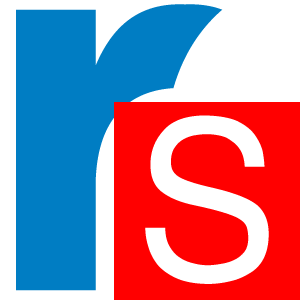
<style>
.page{position:relative;width:300px;height:300px;background:#007dc3}
.page>*{position:absolute;margin:0}
.t1{font:220px "Helios";letter-spacing:0.02em;color:#ffffff}
</style>
<div class="page">
<p class="t1" style="left:145px;top:115px;width:124px;height:169px">S</p>
</div>
